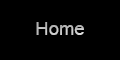
<style>
.page{position:relative;width:120px;height:60px;background:#000000}
.page>*{position:absolute;margin:0}
.t1{font:20px "Gautami";color:#c0c0c0}
</style>
<div class="page">
<p class="t1" style="left:36px;top:22px;width:48px;height:13px">Home</p>
</div>
